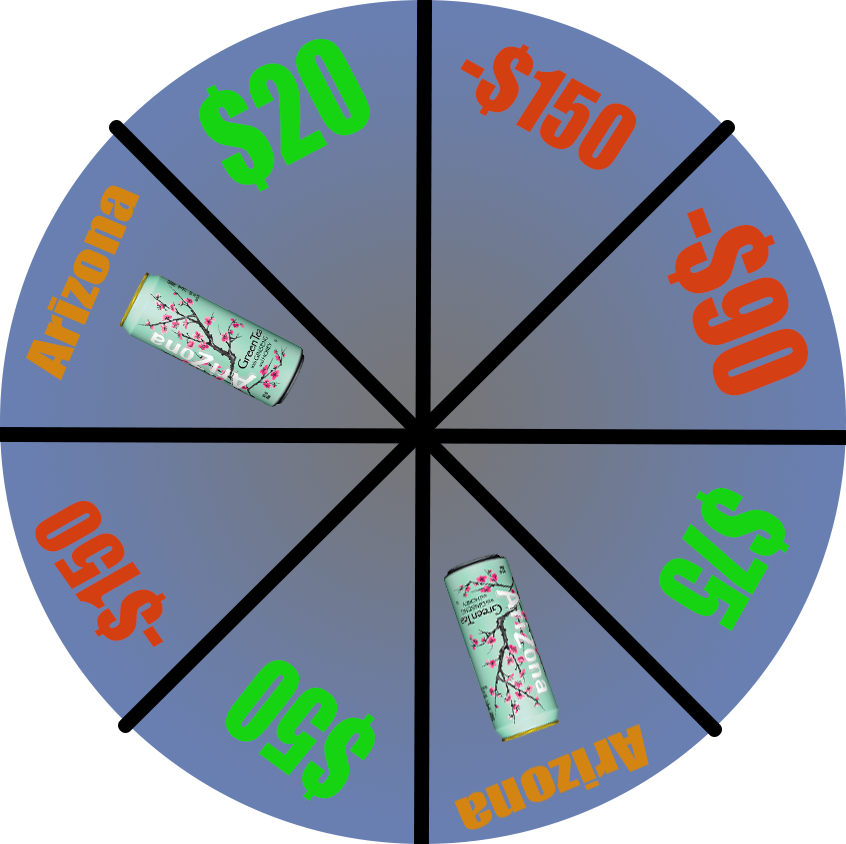
<style>
.page{position:relative;width:846px;height:844px;background:#ffffff}
.page>*{position:absolute;margin:0}
.t1{font:123.7px "Impact";color:#16d411;scale:0.84 1}
.t2{font:86.9px "Impact";color:#d43f11;scale:0.92 1}
.t3{font:119.7px "Impact";color:#d44013;scale:0.85 1}
.t4{font:112.5px "Impact";color:#16d411;scale:0.78 1}
.t5{font:83.5px "Impact";color:#d43f11;scale:0.88 1}
</style>
<div class="page">
<p class="t1" style="left:199px;top:39px;width:171px;height:153px;rotate:-28deg">$20</p>
<p class="t2" style="left:460px;top:44px;width:176px;height:126px;rotate:29deg">-$150</p>
<p class="t3" style="left:667px;top:207px;width:141px;height:189px;rotate:70deg">-$90</p>
<p class="t4" style="left:659px;top:488px;width:131px;height:143px;rotate:120deg">$75</p>
<p class="t5" style="left:35px;top:501px;width:132px;height:146px;rotate:-125deg">-$150</p>
<p class="t4" style="left:225px;top:660px;width:150px;height:141px;rotate:-144deg">$50</p>
</div>
